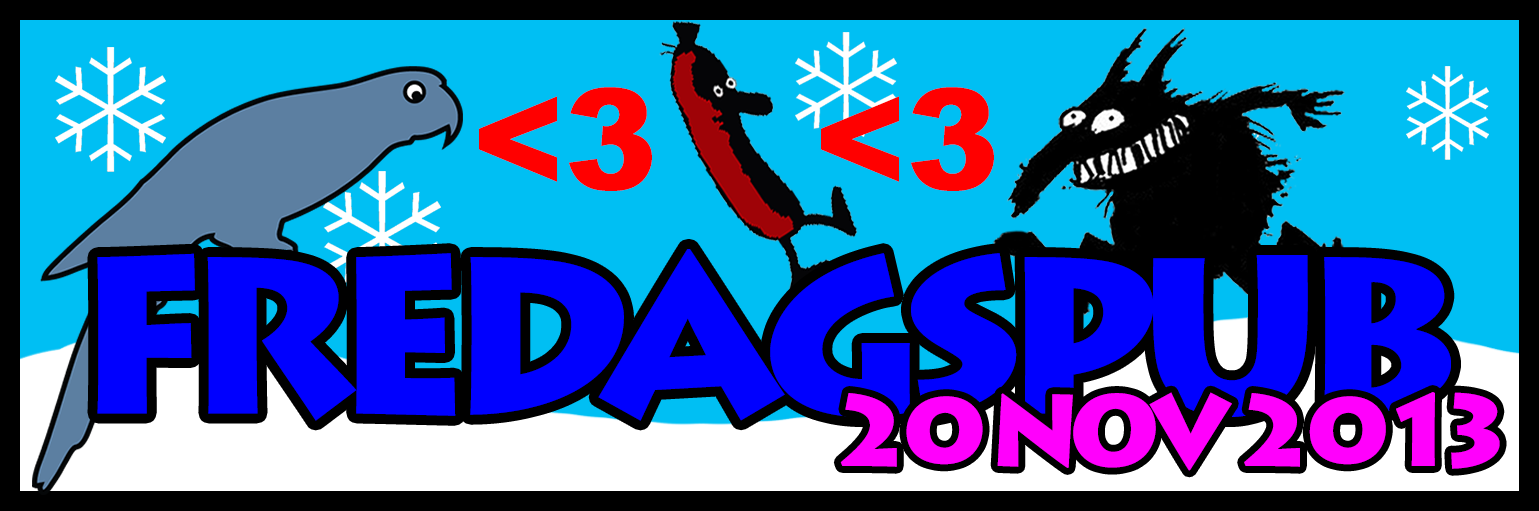
<style>
.page{position:relative;width:1539px;height:511px;background:#00bff3}
.page>*{position:absolute;margin:0}
.t1{font:140px "Arial-Black";color:#ff0000}
.t2{font:220px "LithosPro-Black";letter-spacing:-0.1em;color:#0000ff}
.t3{font:100px "LithosPro-Black";letter-spacing:-0.1em;color:#ff00fc}
.t4{font:100px "LithosPro-Black";letter-spacing:-0.27em;color:#ff00fc}
</style>
<div class="page">
<p class="t1" style="left:479px;top:87px;width:173px;height:104px">&lt;3</p>
<p class="t1" style="left:821px;top:87px;width:173px;height:104px">&lt;3</p>
<p class="t2" style="left:97px;top:249px;width:1354px;height:172px">FREDAGSPUB</p>
<p class="t3" style="left:840px;top:392px;width:660px;height:79px">20 NOV 20<span class="t4">13</span></p>
</div>
